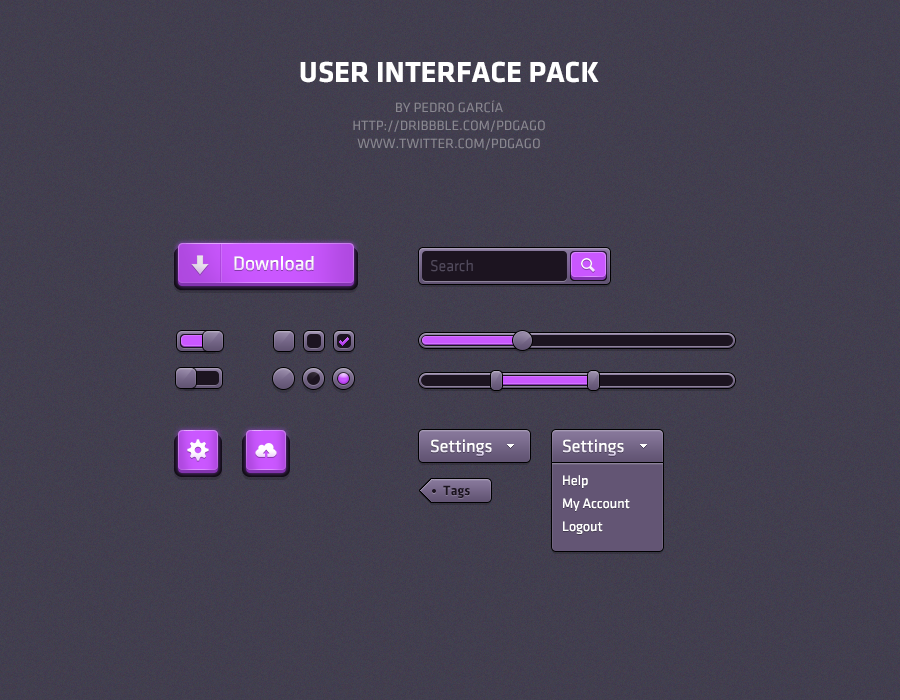
<style>
.page{position:relative;width:900px;height:700px}
.page>*{position:absolute;margin:0}
.t1{font:14px/18px "KlavikaRegular-OSF";color:#898790}
.t2{font:30px/18px "KlavikaBold-Bold";color:#ffffff}
.t3{font:30px/30px "KlavikaBold-Bold";color:#ffffff}
.t4{font:14px/30px "KlavikaRegular-OSF";color:#898790}
.t5{font:20px "KlavikaRegular-OSF";color:#faf3ff}
.t6{font:20px "KlavikaRegular-OSF"}
.t7{font:16px "KlavikaRegular-OSF";color:#514a5c}
.t8{font:18px "KlavikaRegular-OSF";color:#ffffff}
.t9{font:14px "KlavikaBold-Bold";color:#1c1420}
.t10{font:14px/23px "KlavikaRegular-OSF";color:#ffffff}
</style>
<div class="page">
<p class="t1" style="left:300px;top:61px;width:299px;height:89px;text-align:center"><span class="t2">USER INT</span><span class="t3">ERFACE PACK<br></span><span class="t4">BY PE</span>DRO GARCÍA<br>HTTP://DRIBBBLE.COM/PDGAGO<br>WWW.TWITTER.COM/PDGAGO</p>
<p class="t5" style="left:234px;top:256px;width:80px;height:15px">Download</p>
<p class="t6" style="left:234px;top:258px;width:80px;height:15px">Download</p>
<p class="t7" style="left:431px;top:259px;width:42px;height:13px">Search</p>
<p class="t8" style="left:431px;top:439px;width:61px;height:17px">Settings</p>
<p class="t8" style="left:563px;top:439px;width:61px;height:17px">Settings</p>
<p class="t9" style="left:443px;top:485px;width:27px;height:13px">Tags</p>
<p class="t10" style="left:563px;top:475px;width:67px;height:59px">Help<br>My Account<br>Logout</p>
</div>
